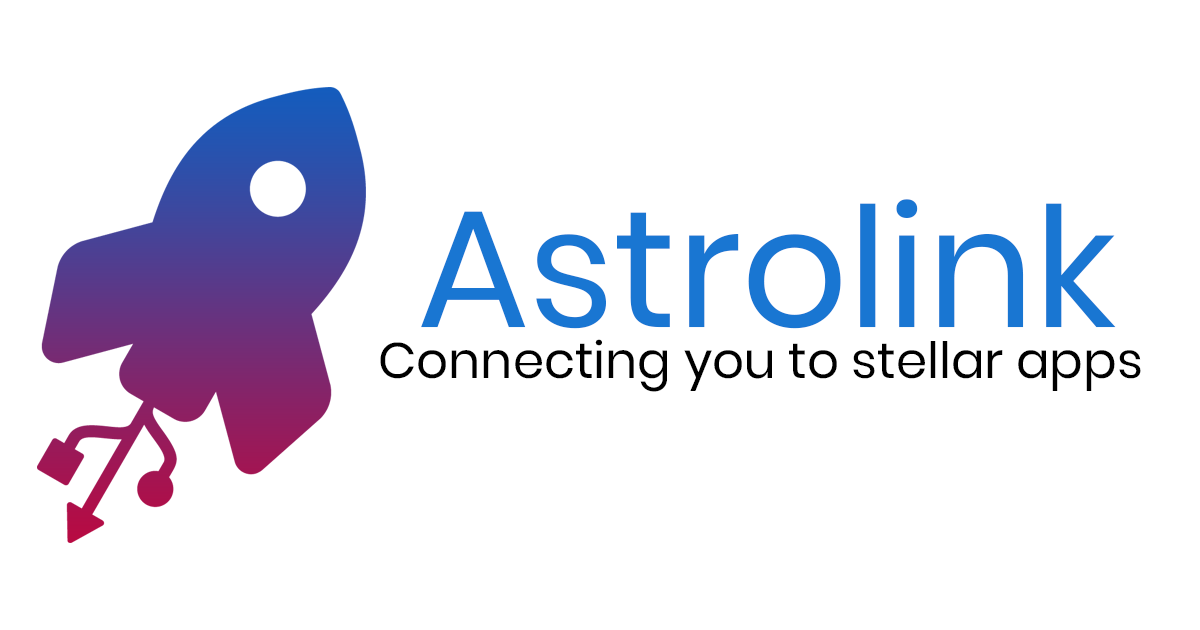
<style>
.page{position:relative;width:1200px;height:630px;background:#ffffff}
.page>*{position:absolute;margin:0}
.t1{font:166.7px "Poppins-Regular";color:#1976d2}
.t2{font:50px "Poppins-Regular";color:#000000}
</style>
<div class="page">
<p class="t1" style="left:421px;top:199px;width:695px;height:130px">Astrolink</p>
<p class="t2" style="left:380px;top:339px;width:761px;height:53px">Connecting you to stellar apps</p>
</div>
